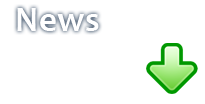
<style>
.page{position:relative;width:205px;height:104px;background:#ffffff}
.page>*{position:absolute;margin:0}
.t1{font:35.2px "Candara-Bold";color:#ffffff}
</style>
<div class="page">
<p class="t1" style="left:17px;top:8px;width:82px;height:23px">News</p>
</div>
